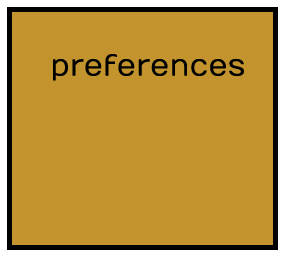
<style>
.page{position:relative;width:285px;height:257px;background:#c3942d}
.page>*{position:absolute;margin:0}
.t1{font:30px "Numans-Regular";color:#000000}
</style>
<div class="page">
<p class="t1" style="left:53px;top:54px;width:191px;height:27px">preferences</p>
</div>
